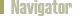
<style>
.page{position:relative;width:80px;height:16px;background:#ffffff}
.page>*{position:absolute;margin:0}
.t1{font:20px "Haettenschweiler";color:#bdbda2}
</style>
<div class="page">
<p class="t1" style="left:11px;top:0px;width:61px;height:16px">Navigator</p>
</div>
